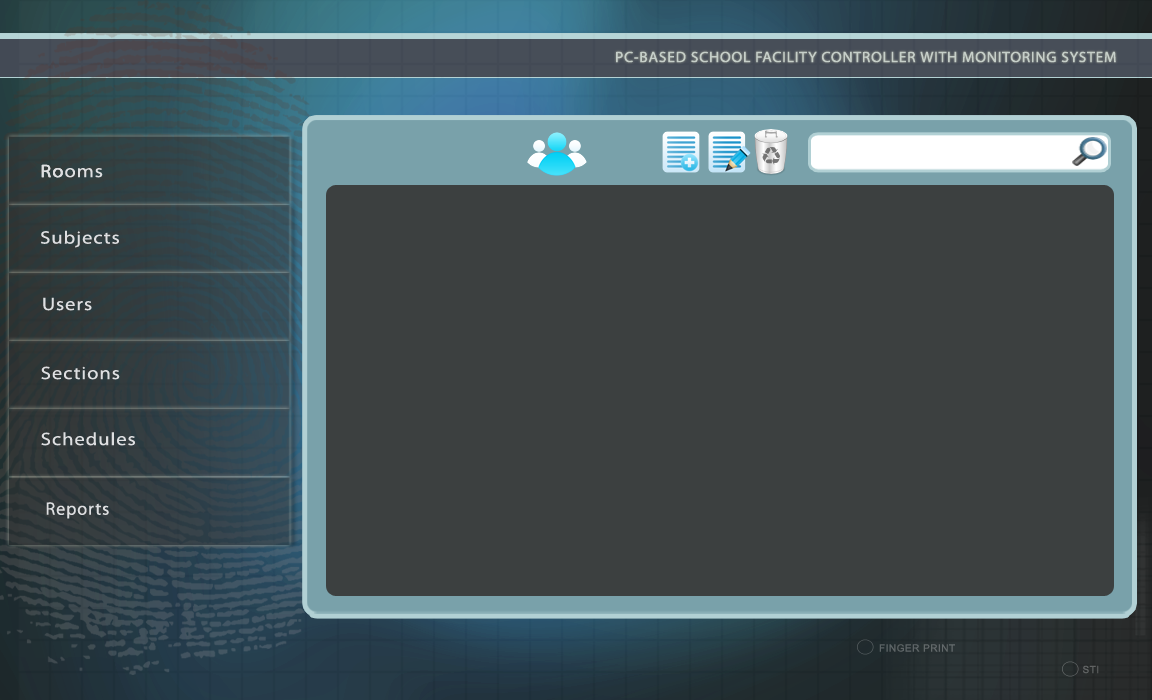
<style>
.page{position:relative;width:1152px;height:700px;background:#3c4040}
.page>*{position:absolute;margin:0}
.t1{font:15px "MyriadWebPro";letter-spacing:0.05em;color:#c6cfc9}
.t2{font:18px "MyriadPro-Regular";letter-spacing:0.05em;color:#dedfe1;scale:1.13 1}
.t3{font:18px "MyriadPro-Regular";letter-spacing:0.05em;color:#dedfe1}
.t4{font:10px "ArialMT";letter-spacing:0.05em;color:#626869}
.t5{font:10px "ArialMT";letter-spacing:0.05em;color:#626464}
</style>
<div class="page">
<p class="t1" style="left:616px;top:51px;width:500px;height:12px">PC-BASED SCHOOL FACILITY CONTROLLER WITH MONITORING SYSTEM</p>
<p class="t2" style="left:41px;top:164px;width:62px;height:14px">Rooms</p>
<p class="t2" style="left:41px;top:164px;width:22px;height:14px">Ro</p>
<p class="t2" style="left:41px;top:230px;width:78px;height:18px">Subjects</p>
<p class="t2" style="left:43px;top:297px;width:49px;height:14px">Users</p>
<p class="t2" style="left:41px;top:366px;width:79px;height:14px">Sections</p>
<p class="t2" style="left:41px;top:432px;width:94px;height:14px">Schedules</p>
<p class="t3" style="left:46px;top:502px;width:63px;height:17px">Reports</p>
<p class="t4" style="left:879px;top:644px;width:76px;height:8px">FINGER PRINT</p>
<p class="t5" style="left:1083px;top:665px;width:16px;height:9px">STI</p>
</div>
